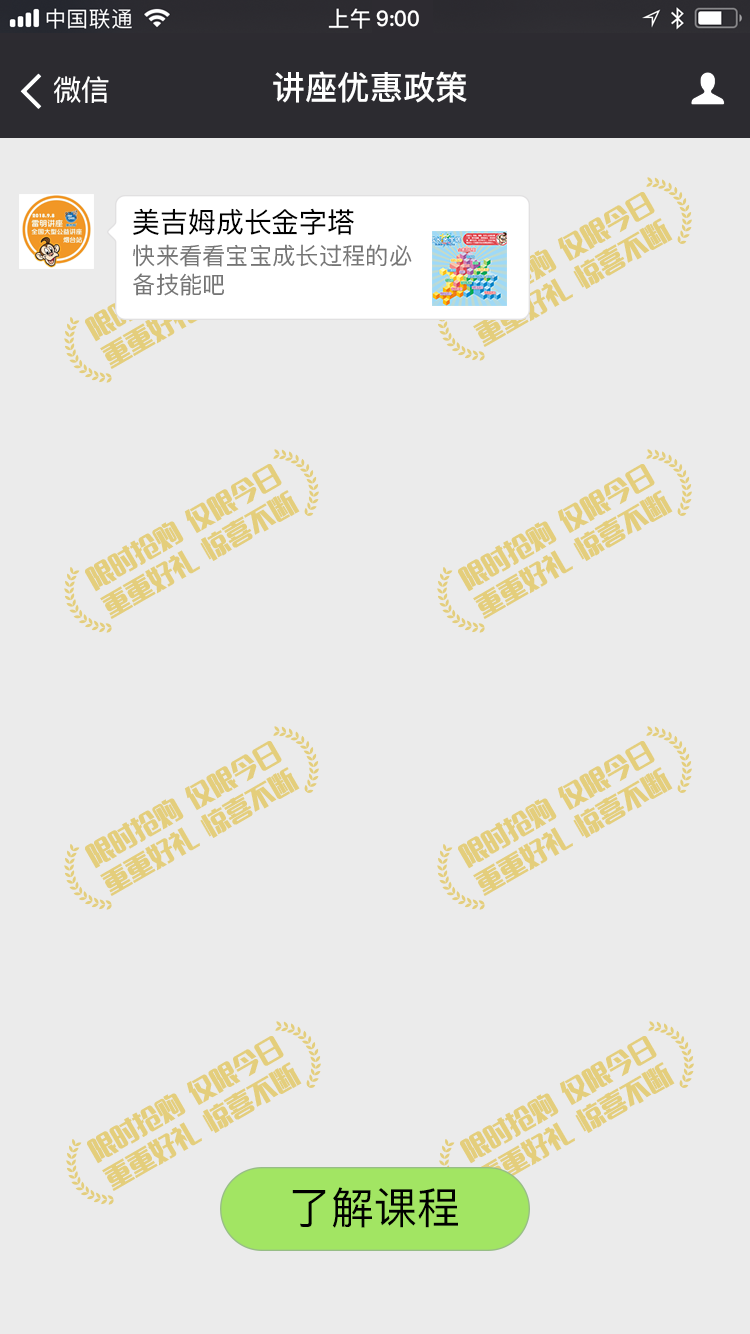
<style>
.page{position:relative;width:750px;height:1334px;background:#ebebeb}
.page>*{position:absolute;margin:0}
.t1{font:21.3px "PingFangSC-Medium";color:#ffffff}
.t2{font:28.8px "PingFangSC-Regular";color:#ffffff}
.t3{font:32.9px "PingFangSC-Medium";color:#ffffff}
.t4{font:28.1px "PingFangSC-Regular";color:#000000}
.t5{font:23.6px/34.1px "PingFangSC-Regular";color:#757575}
.t6{font:43.4px "PingFangSC-Regular";color:#000000}
</style>
<div class="page">
<p class="t1" style="left:376px;top:10px;width:43px;height:17px">9:00</p>
<p class="t2" style="left:54px;top:76px;width:55px;height:27px">微信</p>
<p class="t3" style="left:273px;top:71px;width:194px;height:32px">讲座优惠政策</p>
<p class="t4" style="left:133px;top:208px;width:221px;height:27px">美吉姆成长金字塔</p>
<p class="t5" style="left:133px;top:244px;width:279px;height:52px">快来看看宝宝成长过程的必<br>备技能吧</p>
<p class="t6" style="left:292px;top:1187px;width:166px;height:41px">了解课程</p>
</div>
